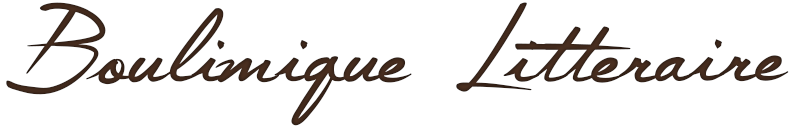
<style>
.page{position:relative;width:798px;height:127px;background:#ffffff}
.page>*{position:absolute;margin:0}
.t1{font:196.3px "The-Constellation-of-Heracles";color:#4a2f20}
</style>
<div class="page">
<p class="t1" style="left:6px;top:2px;width:783px;height:124px;rotate:-1deg">Boulimique Litteraire</p>
</div>
